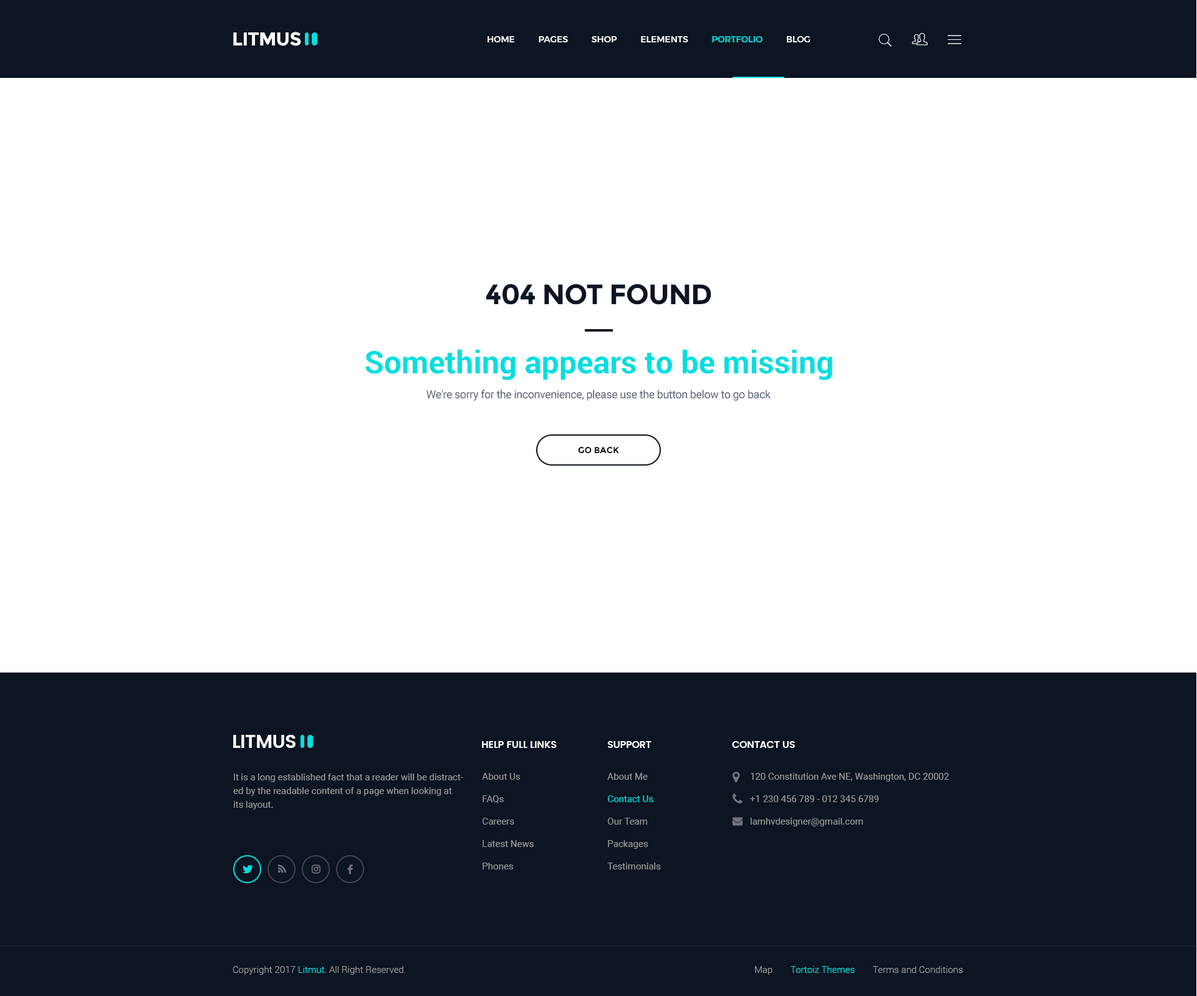
<style>
.page{position:relative;width:1197px;height:996px;background:#ffffff}
.page>*{position:absolute;margin:0}
.t1{font:18.7px "Montserrat-Bold";letter-spacing:-0.025em;color:#ffffff;text-transform:uppercase}
.t2{font:8.7px "Montserrat-Medium";color:#ffffff;text-transform:uppercase}
.t3{font:8.7px "Montserrat-Medium";color:#03dedf;text-transform:uppercase}
.t4{font:28.1px "Montserrat-Bold";letter-spacing:-0.025em;color:#0d1422;text-transform:uppercase}
.t5{font:31.2px "Roboto-Bold";color:#03dedf}
.t6{font:11.2px "Roboto-Regular";letter-spacing:-0.025em;color:#5b6578}
.t7{font:8.7px "Montserrat-Bold";color:#0d1422;text-transform:uppercase}
.t8{font:18.7px "Poppins-SemiBold";letter-spacing:-0.025em;color:#ffffff;text-transform:uppercase}
.t9{font:10px "Poppins-SemiBold";letter-spacing:-0.025em;color:#ffffff;text-transform:uppercase}
.t10{font:9.4px/13.7px "Roboto-Regular";color:#999999}
.t11{font:9.4px/22.4px "Roboto-Regular";color:#999999}
.t12{font:9.4px/22.4px "Roboto-Regular";color:#03dedf}
.t13{font:9.4px "Roboto-Light";color:#999999}
.t14{font:9.4px "Roboto-Light";color:#03dedf}
</style>
<div class="page">
<p class="t1" style="left:233px;top:32px;width:68px;height:14px">Litmus</p>
<p class="t2" style="left:488px;top:36px;width:322px;height:6px">HOME           PAGES           SHOP           ELEMENTS           <span class="t3">PORTFOLIO</span>           BLOG</p>
<p class="t4" style="left:486px;top:284px;width:225px;height:21px">404 not found</p>
<p class="t5" style="left:365px;top:350px;width:467px;height:30px">Something appears to be missing</p>
<p class="t6" style="left:426px;top:390px;width:345px;height:11px">We're sorry for the inconvenience, please use the button below to go back</p>
<p class="t7" style="left:578px;top:447px;width:41px;height:6px">Go Back</p>
<p class="t8" style="left:233px;top:735px;width:62px;height:13px">Litmus</p>
<p class="t9" style="left:482px;top:741px;width:75px;height:7px">Help full links</p>
<p class="t9" style="left:608px;top:741px;width:43px;height:7px">Support</p>
<p class="t9" style="left:732px;top:741px;width:63px;height:7px">Contact Us</p>
<p class="t10" style="left:233px;top:774px;width:230px;height:36px">It is a long established fact that a reader will be distracted by the readable content of a page when looking at its layout.</p>
<p class="t11" style="left:482px;top:773px;width:52px;height:97px">About Us<br>FAQs<br>Careers<br>Latest News<br>Phones</p>
<p class="t11" style="left:607px;top:773px;width:54px;height:97px">About Me<br><span class="t12">Contact Us<br></span>Our Team<br>Packages<br>Testimonials</p>
<p class="t11" style="left:750px;top:773px;width:199px;height:54px">120 Constitution Ave NE, Washington, DC 20002<br>+1 230 456 789 - 012 345 6789<br>lamhvdesigner@gmail.com</p>
<p class="t13" style="left:233px;top:966px;width:173px;height:9px">Copyright 2017 <span class="t14">Litmut</span>. All Right Reserved.</p>
<p class="t13" style="left:755px;top:966px;width:17px;height:9px">Map</p>
<p class="t14" style="left:790px;top:966px;width:65px;height:7px">Tortoiz Themes</p>
<p class="t13" style="left:873px;top:966px;width:90px;height:7px">Terms and Conditions</p>
</div>
